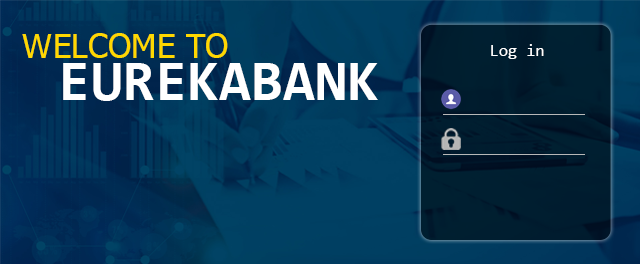
<style>
.page{position:relative;width:640px;height:264px}
.page>*{position:absolute;margin:0}
.t1{font:33.3px/41.7px "Tahoma";color:#ffd800}
.t2{font:58.3px/41.7px "Consolas-Bold";color:#ffffff}
.t3{font:16.7px "Consolas";color:#ffffff}
</style>
<div class="page">
<p class="t1" style="left:22px;top:33px;width:356px;height:68px">WELCOME TO<br><span class="t2"> EUREKABANK</span></p>
<p class="t3" style="left:491px;top:44px;width:53px;height:15px">Log in</p>
</div>
